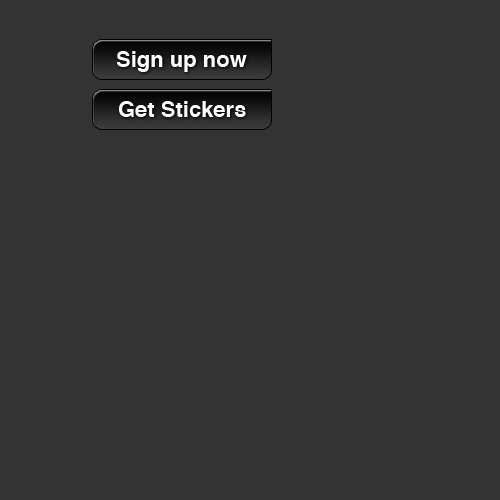
<style>
.page{position:relative;width:500px;height:500px;background:#333333}
.page>*{position:absolute;margin:0}
.t1{font:22px "Helvetica-Bold";color:#ffffff}
</style>
<div class="page">
<p class="t1" style="left:117px;top:51px;width:130px;height:21px">Sign up now</p>
<p class="t1" style="left:119px;top:101px;width:127px;height:16px">Get Stickers</p>
</div>
